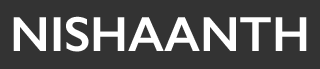
<style>
.page{position:relative;width:320px;height:69px;background:#333333}
.page>*{position:absolute;margin:0}
.t1{font:49.4px "GillSans-SemiBold";color:#ffffff}
</style>
<div class="page">
<p class="t1" style="left:13px;top:16px;width:294px;height:36px">NISHAANTH</p>
</div>
